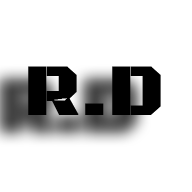
<style>
.page{position:relative;width:192px;height:192px;background:#ffffff}
.page>*{position:absolute;margin:0}
.t1{font:72px "BlackOpsOne-Regular";color:#000000;font-weight:bold;scale:1.03 1}
</style>
<div class="page">
<p class="t1" style="left:28px;top:66px;width:133px;height:49px">R.D</p>
</div>
